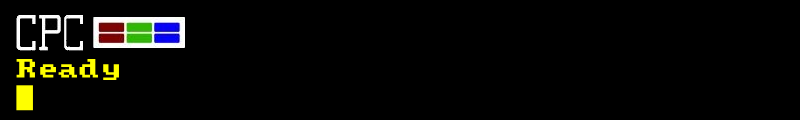
<style>
.page{position:relative;width:800px;height:120px;background:#000000}
.page>*{position:absolute;margin:0}
.t1{font:21px "Amstrad-CPC464";color:#ffff00}
.t2{font:21px "DejaVuSans";color:#ffff00}
</style>
<div class="page">
<p class="t1" style="left:16px;top:59px;width:103px;height:52px">Ready<br><span class="t2">█</span></p>
</div>
